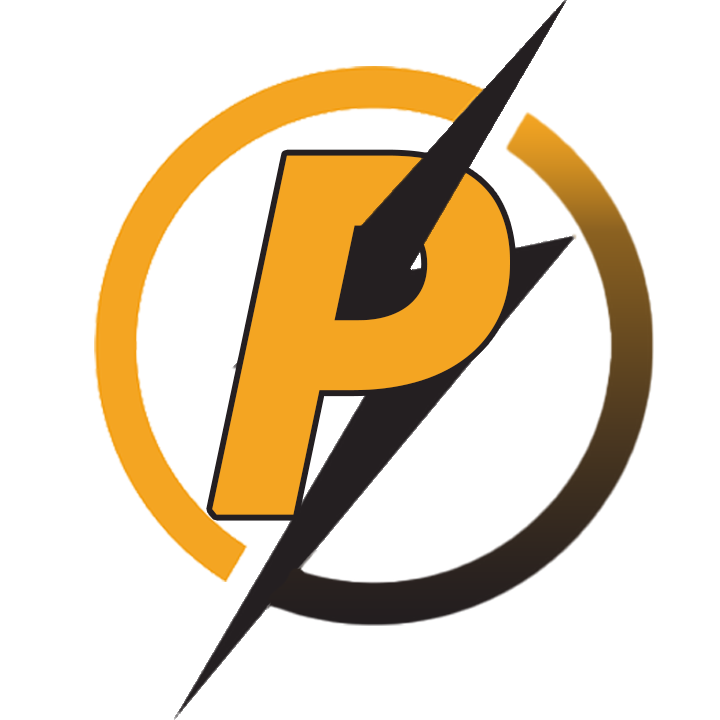
<style>
.page{position:relative;width:720px;height:720px;background:#ffffff}
.page>*{position:absolute;margin:0}
.t1{font:490px "OpenSans-BoldItalic";letter-spacing:0.05em;color:#f4a522;font-weight:bold}
</style>
<div class="page">
<p class="t1" style="left:212px;top:155px;width:298px;height:360px">P</p>
</div>
